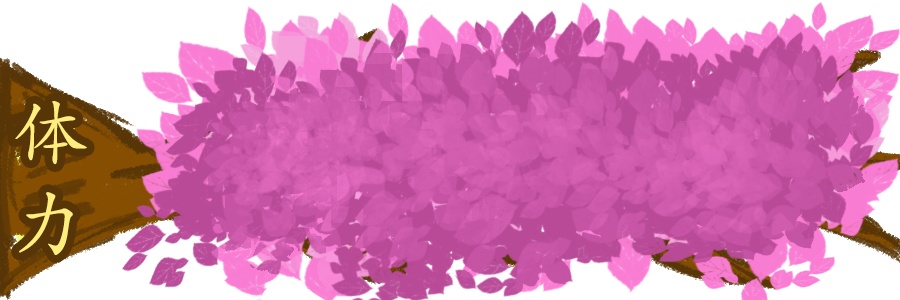
<style>
.page{position:relative;width:900px;height:300px;background:#ffffff}
.page>*{position:absolute;margin:0}
.t1{font:75px "AdobeKaitiStd-Regular";color:#ffee7e}
</style>
<div class="page">
<p class="t1" style="left:15px;top:101px;width:72px;height:154px">体<br>力</p>
</div>
